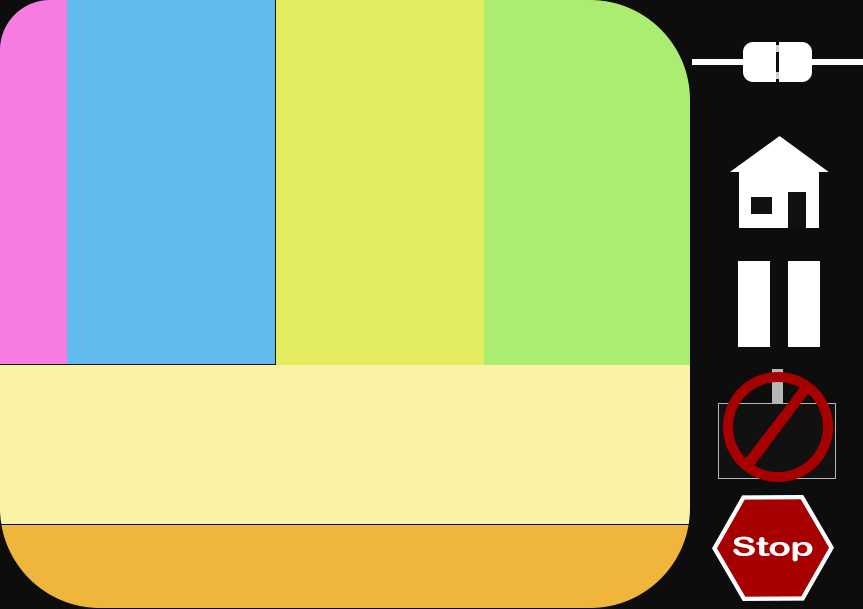
<style>
.page{position:relative;width:863px;height:609px;background:#faf3a5}
.page>*{position:absolute;margin:0}
.t1{font:26px "ArialRoundedMTBold";letter-spacing:-0.02em;color:#ffffff;scale:1.44 1}
</style>
<div class="page">
<p class="t1" style="left:733px;top:536px;width:80px;height:26px">Stop</p>
</div>
